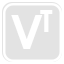
<style>
.page{position:relative;width:64px;height:64px;background:#e3e3e3}
.page>*{position:absolute;margin:0}
.t1{font:48px "CenturyGothic-Bold";color:#ffffff}
.t2{font:30px "CenturyGothic-Bold";color:#ffffff}
</style>
<div class="page">
<p class="t1" style="left:11px;top:15px;width:32px;height:34px">V</p>
<p class="t2" style="left:40px;top:10px;width:13px;height:22px">T</p>
</div>
